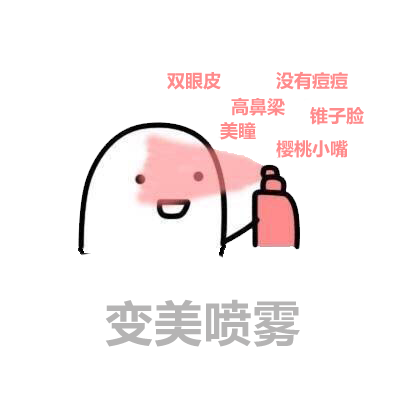
<style>
.page{position:relative;width:400px;height:400px;background:#ffffff}
.page>*{position:absolute;margin:0}
.t1{font:18px "MicrosoftYaHei-Bold";color:#ff8b8c}
.t2{font:48px "MicrosoftYaHei-Bold";letter-spacing:0.025em;color:#b5b4b4}
</style>
<div class="page">
<p class="t1" style="left:167px;top:72px;width:54px;height:18px">双眼皮</p>
<p class="t1" style="left:276px;top:71px;width:72px;height:19px">没有痘痘</p>
<p class="t1" style="left:231px;top:97px;width:54px;height:19px">高鼻梁</p>
<p class="t1" style="left:310px;top:107px;width:54px;height:18px">锥子脸</p>
<p class="t1" style="left:220px;top:122px;width:36px;height:18px">美瞳</p>
<p class="t1" style="left:276px;top:140px;width:72px;height:18px">樱桃小嘴</p>
<p class="t2" style="left:105px;top:299px;width:195px;height:48px">变美喷雾</p>
</div>
